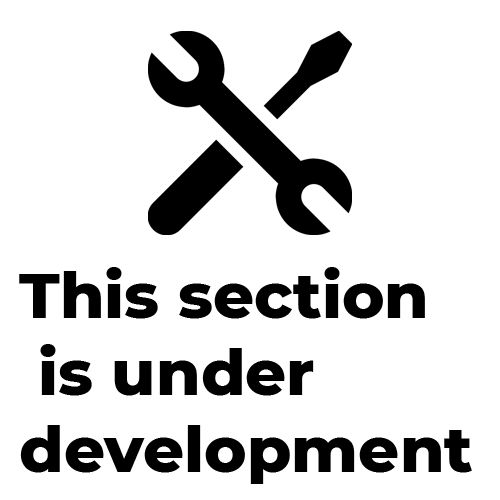
<style>
.page{position:relative;width:500px;height:500px;background:#ffffff}
.page>*{position:absolute;margin:0}
.t1{font:64px "Montserrat-ExtraBold";color:#000000}
</style>
<div class="page">
<p class="t1" style="left:19px;top:267px;width:453px;height:217px">This section<br> is under <br>development</p>
</div>
